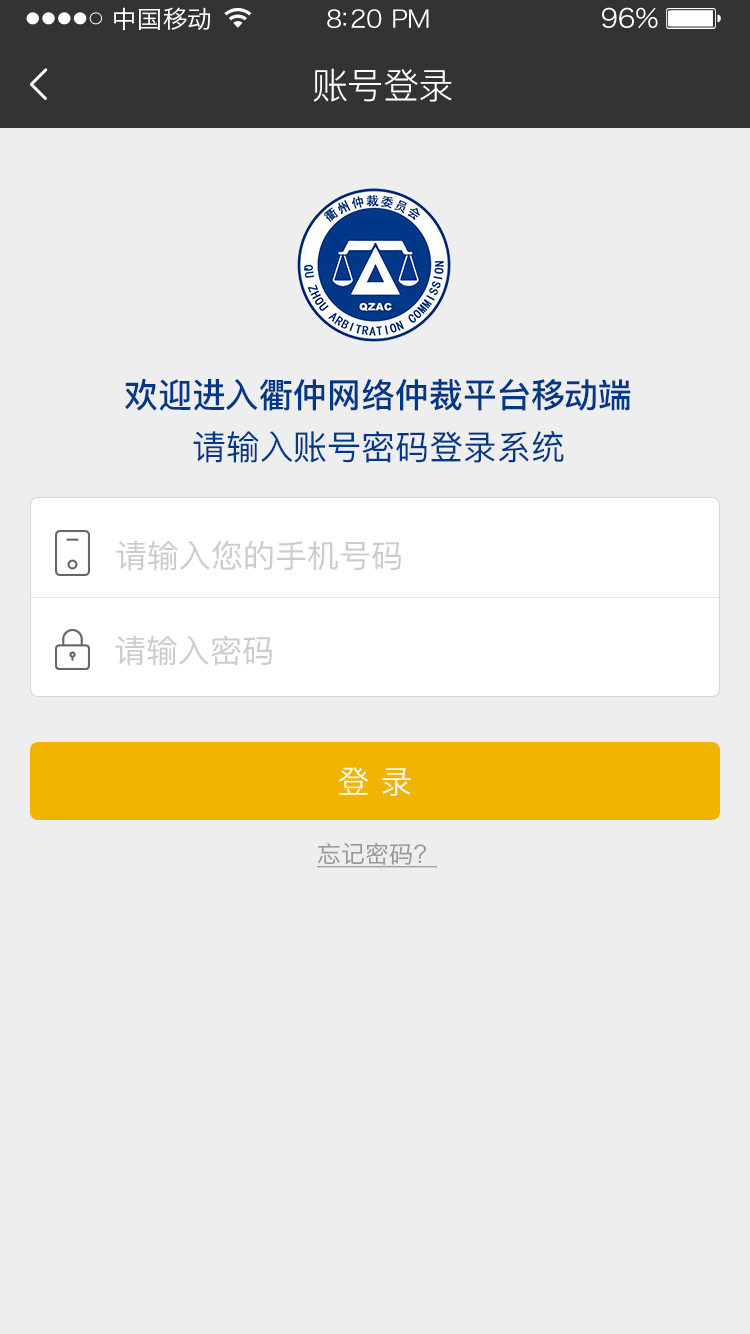
<style>
.page{position:relative;width:750px;height:1334px;background:#eeeeee}
.page>*{position:absolute;margin:0}
.t1{font:24px "HiraginoSansGB-W3";letter-spacing:0.02em;color:#ffffff;scale:1.03 1}
.t2{font:24px "HiraginoSansGB-W3";letter-spacing:-0.02em;color:#ffffff;scale:1.03 1}
.t3{font:26.2px "HiraginoSansGB-W3";letter-spacing:-0.02em;color:#ffffff;scale:1.03 1}
.t4{font:36px "PingFang-SC-Regular";letter-spacing:-0.02em;color:#ffffff}
.t5{font:34px "PingFang-SC-Bold";color:#003888;font-variant:small-caps}
.t6{font:34px "PingFang-SC-Medium";color:#003888;font-variant:small-caps}
.t7{font:32px "PingFangSC-Regular";color:#cccccc}
.t8{font:32px "HiraginoSansGB-W3";color:#ffffff}
.t9{font:24px "HiraginoSansGB-W3";color:#999999;text-decoration:underline}
</style>
<div class="page">
<p class="t1" style="left:114px;top:7px;width:97px;height:24px">中国移动</p>
<p class="t2" style="left:327px;top:9px;width:102px;height:19px">8:20 PM</p>
<p class="t3" style="left:602px;top:7px;width:56px;height:22px">96%</p>
<p class="t4" style="left:313px;top:68px;width:139px;height:34px">账号登录</p>
<p class="t5" style="left:125px;top:378px;width:506px;height:33px">欢迎进入衢仲网络仲裁平台移动端</p>
<p class="t6" style="left:193px;top:431px;width:371px;height:32px">请输入账号密码登录系统</p>
<p class="t7" style="left:116px;top:540px;width:285px;height:31px">请输入您的手机号码</p>
<p class="t7" style="left:115px;top:635px;width:157px;height:31px">请输入密码</p>
<p class="t8" style="left:338px;top:767px;width:73px;height:29px">登 录</p>
<p class="t9" style="left:317px;top:842px;width:121px;height:26px">忘记密码？</p>
</div>
